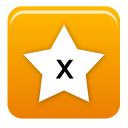
<style>
.page{position:relative;width:128px;height:128px;background:#ffffff}
.page>*{position:absolute;margin:0}
.t1{font:36px "ArialMT";color:#000000}
</style>
<div class="page">
<p class="t1" style="left:55px;top:59px;width:19px;height:20px">x</p>
</div>
